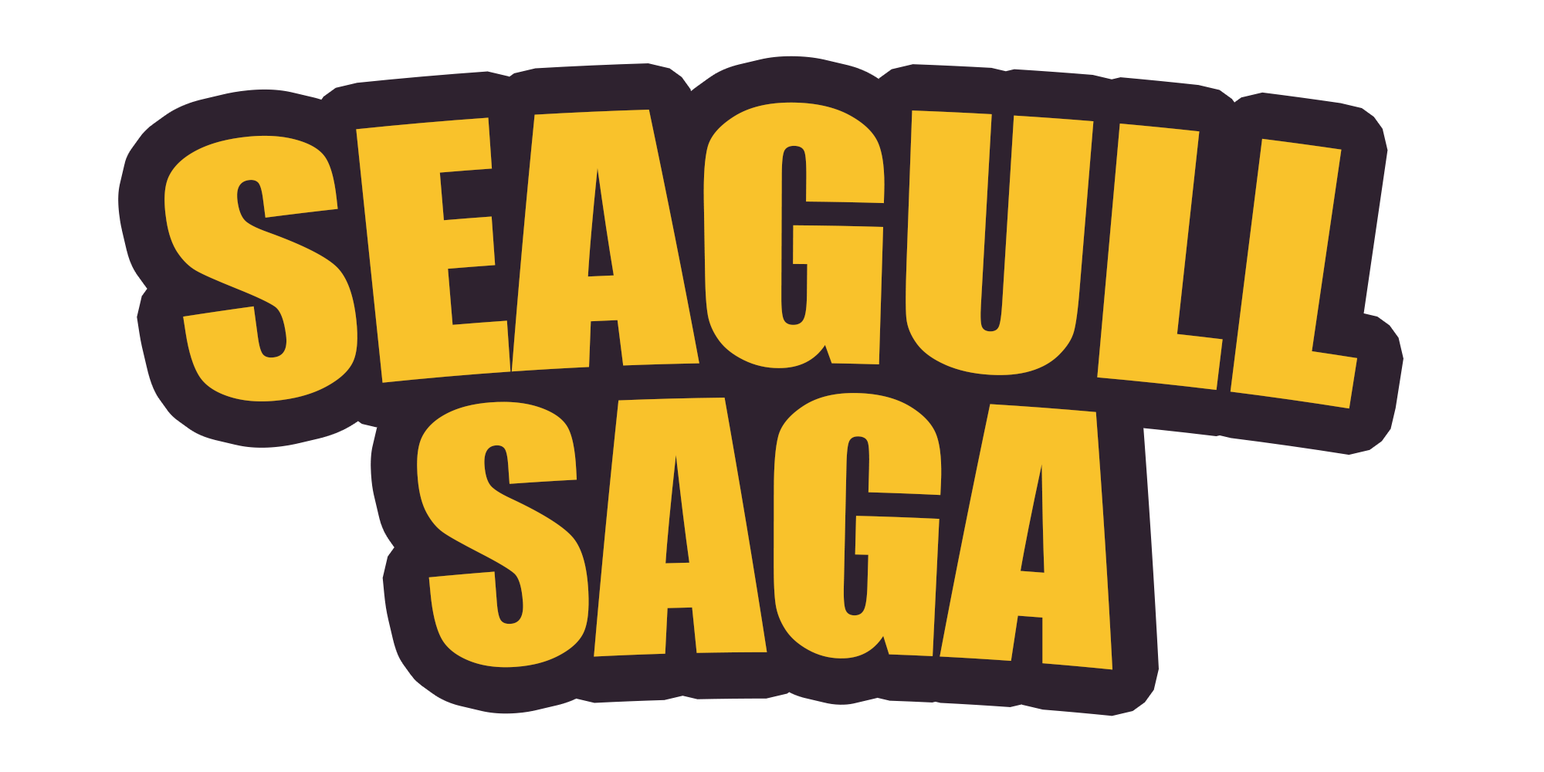
<style>
.page{position:relative;width:1544px;height:772px;background:#ffffff}
.page>*{position:absolute;margin:0}
.t1{font:321.7px/289.6px "Impact";letter-spacing:-0.01em;color:#f9c22b}
</style>
<div class="page">
<p class="t1" style="left:164px;top:102px;width:1193px;height:568px;text-align:center">SEAGULL<br>SAGA</p>
</div>
